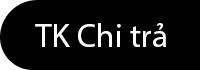
<style>
.page{position:relative;width:200px;height:70px;background:#000000}
.page>*{position:absolute;margin:0}
.t1{font:32.9px "MyriadPro-Regular";color:#fefefe}
</style>
<div class="page">
<p class="t1" style="left:35px;top:23px;width:131px;height:24px">TK Chi trả</p>
</div>
